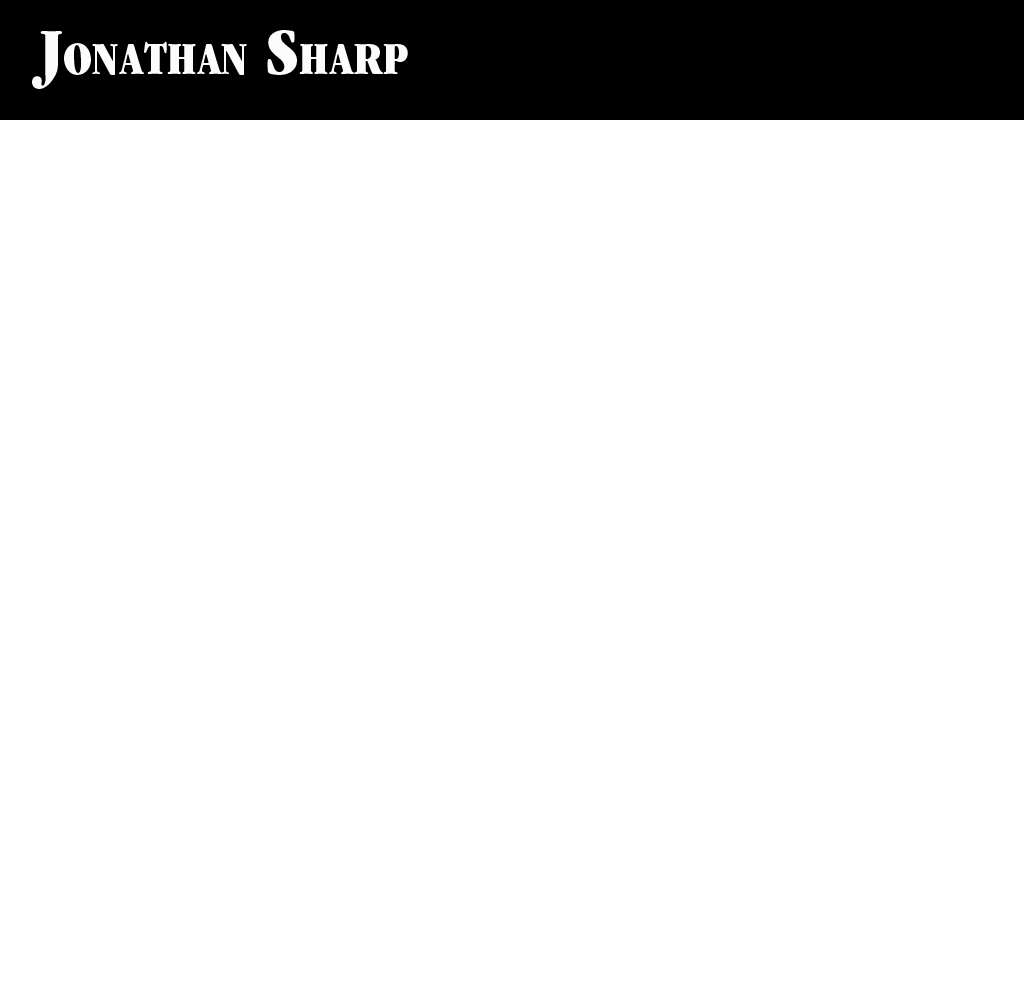
<style>
.page{position:relative;width:1024px;height:1000px;background:#ffffff}
.page>*{position:absolute;margin:0}
.t1{font:68.9px "ITCGaramondStd-UltCond";color:#fcfcfc;font-variant:small-caps}
</style>
<div class="page">
<p class="t1" style="left:32px;top:30px;width:376px;height:59px">Jonathan Sharp</p>
</div>
